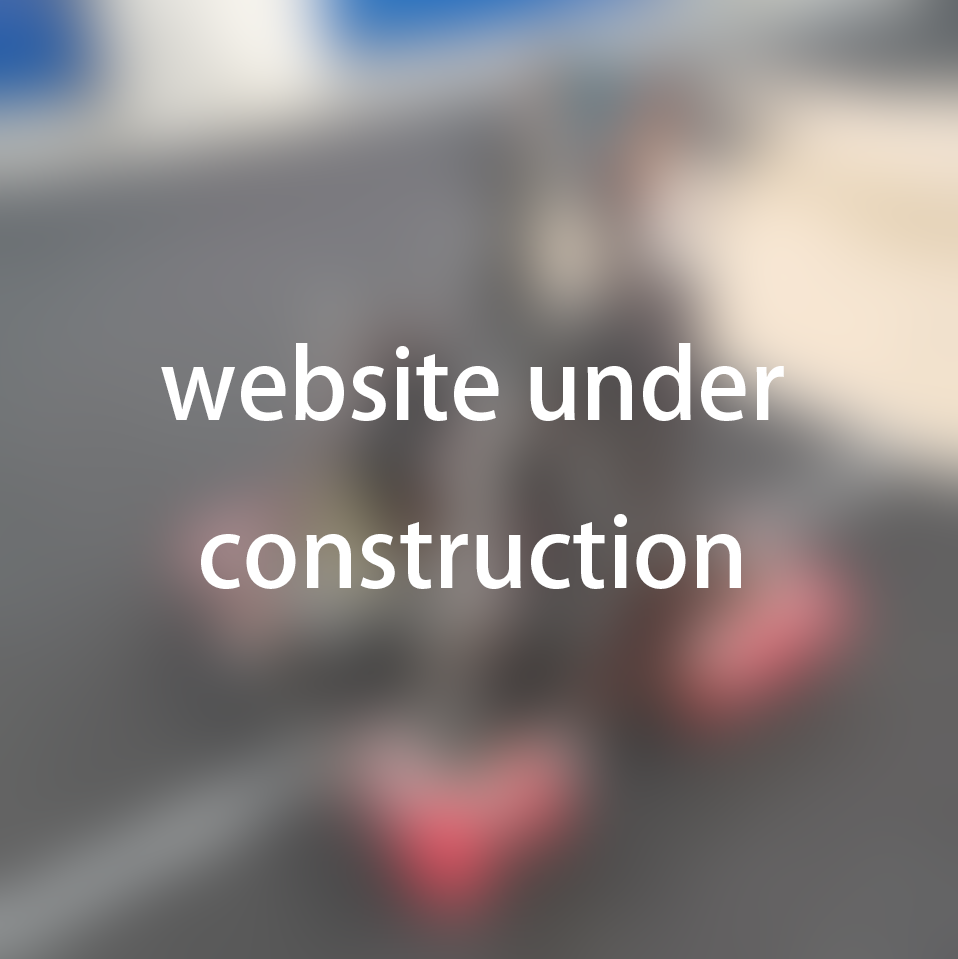
<style>
.page{position:relative;width:958px;height:959px}
.page>*{position:absolute;margin:0}
.t1{font:96px "AdobeHeitiStd-Regular";color:#ffffff}
</style>
<div class="page">
<p class="t1" style="left:161px;top:343px;width:623px;height:246px;text-align:center">website under construction</p>
</div>
